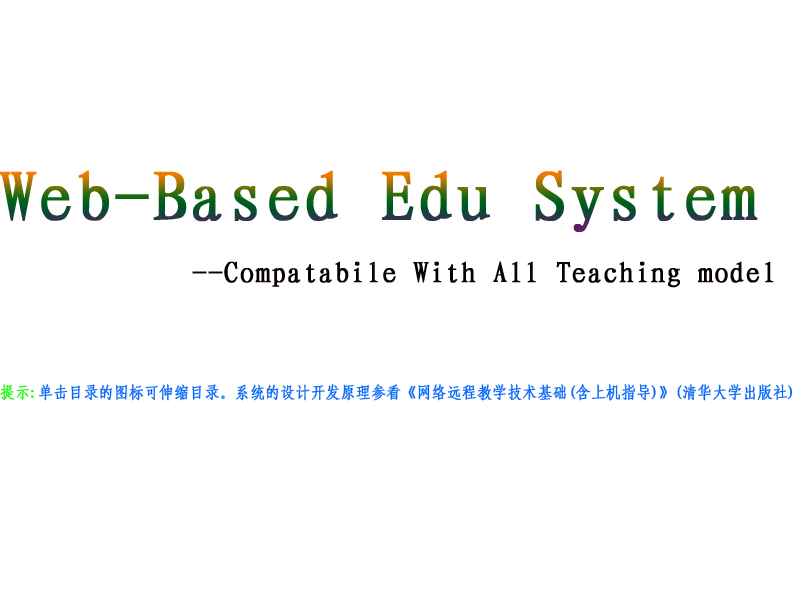
<style>
.page{position:relative;width:800px;height:600px;background:#ffffff}
.page>*{position:absolute;margin:0}
.t1{font:72px "FangSong_GB2312";font-weight:bold}
.t2{font:30px "FangSong_GB2312";color:#0a0101;font-weight:bold}
.t3{font:16.2px "FangSong_GB2312";color:#0a69f7;font-weight:bold;scale:0.91 1}
.t4{font:16.2px "FangSong_GB2312";color:#20f70a;font-weight:bold;scale:0.91 1}
</style>
<div class="page">
<p class="t1" style="left:0px;top:170px;width:758px;height:62px">Web-Based Edu System</p>
<p class="t2" style="left:192px;top:261px;width:582px;height:27px">--Compatabile With All Teaching model</p>
<p class="t3" style="left:0px;top:384px;width:793px;height:17px"><span class="t4">提示:</span>单击目录的图标可伸缩目录。系统的设计开发原理参看《网络远程教学技术基础(含上机指导)》(清华大学出版社)</p>
</div>
